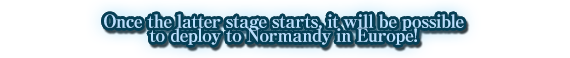
<style>
.page{position:relative;width:570px;height:58px;background:#ffffff}
.page>*{position:absolute;margin:0}
.t1{font:18px/14px "RyuminPro-ExBold";letter-spacing:-0.04em;color:#b9e0ff}
</style>
<div class="page">
<p class="t1" style="left:104px;top:14px;width:360px;height:31px;text-align:center">Once the latter stage starts, it will be possible<br>to deploy to Normandy in Europe!</p>
</div>
